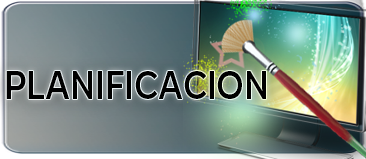
<style>
.page{position:relative;width:366px;height:159px}
.page>*{position:absolute;margin:0}
.t1{font:40px "CorsaGrotesk-Bold";color:#000000;scale:0.8 1}
</style>
<div class="page">
<p class="t1" style="left:6px;top:71px;width:260px;height:28px">PLANIFICACION</p>
</div>
